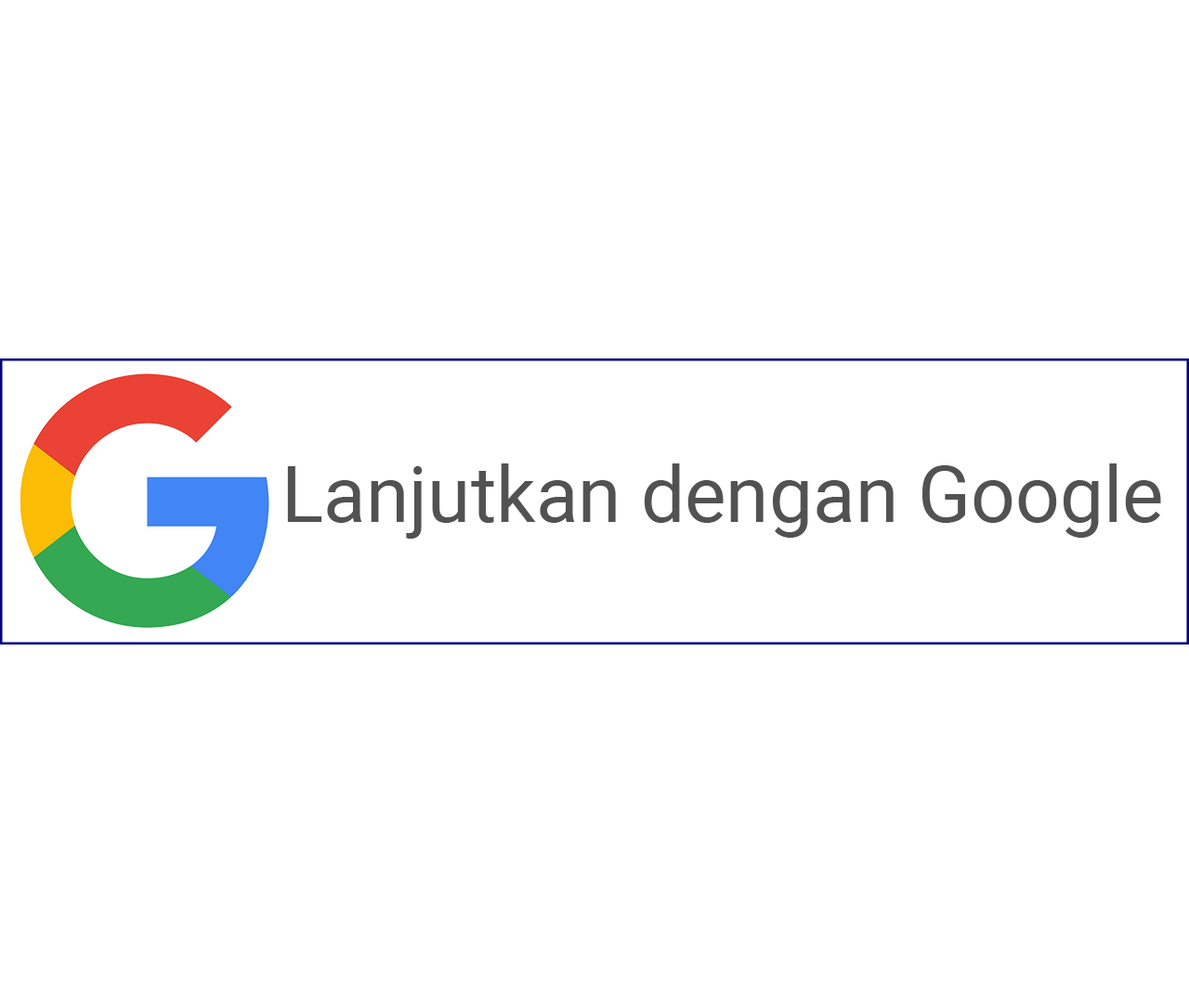
<style>
.page{position:relative;width:1189px;height:1003px;background:#ffffff}
.page>*{position:absolute;margin:0}
.t1{font:78px "Roboto-Regular";color:#525252}
</style>
<div class="page">
<p class="t1" style="left:287px;top:463px;width:874px;height:76px">Lanjutkan dengan Google</p>
</div>
